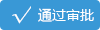
<style>
.page{position:relative;width:100px;height:30px;background:#3998d6}
.page>*{position:absolute;margin:0}
.t1{font:20px "AdobeHeitiStd-Regular";color:#ffffff}
.t2{font:14px "MicrosoftYaHei";color:#ffffff}
</style>
<div class="page">
<p class="t1" style="left:12px;top:6px;width:19px;height:18px">√</p>
<p class="t2" style="left:38px;top:8px;width:56px;height:14px">通过审批</p>
</div>
